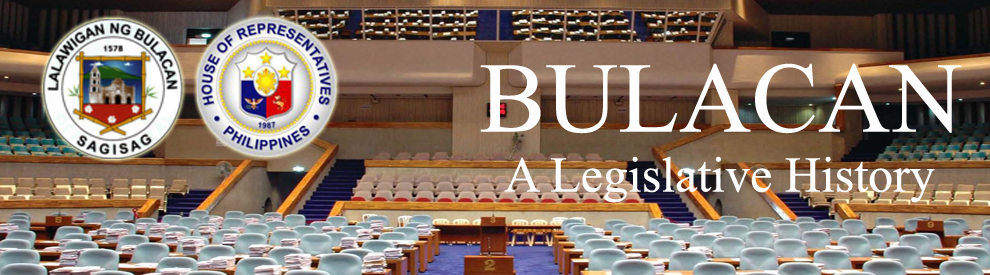
<style>
.page{position:relative;width:990px;height:275px}
.page>*{position:absolute;margin:0}
.t1{font:50px "TimesNewRomanPSMT";color:#fdfcfc}
.t2{font:100px "TimesNewRomanPSMT";color:#fdfdfd}
</style>
<div class="page">
<p class="t1" style="left:480px;top:63px;width:482px;height:140px;text-align:center"><span class="t2">BULACAN<br></span>A Legislative History</p>
</div>
